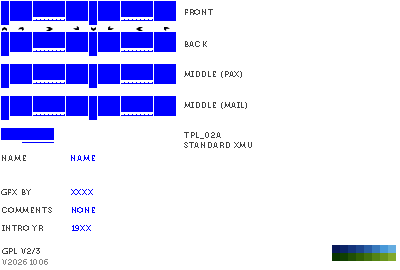
<style>
.page{position:relative;width:400px;height:270px;background:#ffffff}
.page>*{position:absolute;margin:0}
.t1{font:8px "Museo700-Regular";letter-spacing:0.075em;color:#404040;text-transform:uppercase}
.t2{font:8px "Museo700-Regular";letter-spacing:0.075em;color:#0000ff;text-transform:uppercase}
.t3{font:8px "Museo700-Regular";letter-spacing:0.075em;color:#848484;text-transform:uppercase}
</style>
<div class="page">
<p class="t1" style="left:185px;top:9px;width:28px;height:6px">front</p>
<p class="t1" style="left:185px;top:41px;width:22px;height:6px">back</p>
<p class="t1" style="left:184px;top:71px;width:58px;height:7px">middle (pax)</p>
<p class="t1" style="left:184px;top:102px;width:63px;height:7px">middle (mail)</p>
<p class="t1" style="left:184px;top:132px;width:68px;height:16px">tpl_02a<br>standard xmu</p>
<p class="t1" style="left:2px;top:155px;width:24px;height:6px">name</p>
<p class="t2" style="left:71px;top:155px;width:24px;height:6px">name</p>
<p class="t1" style="left:1px;top:189px;width:30px;height:6px">gfx by</p>
<p class="t2" style="left:71px;top:189px;width:22px;height:6px">xxxx</p>
<p class="t1" style="left:2px;top:207px;width:50px;height:6px">comments</p>
<p class="t2" style="left:72px;top:207px;width:23px;height:6px">none</p>
<p class="t1" style="left:2px;top:225px;width:41px;height:6px">intro yr</p>
<p class="t2" style="left:72px;top:225px;width:19px;height:6px">19xx</p>
<p class="t1" style="left:2px;top:248px;width:38px;height:6px">gpl v2/3</p>
<p class="t3" style="left:2px;top:259px;width:46px;height:6px">v20261006</p>
</div>
